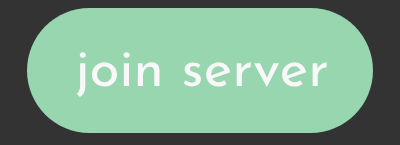
<style>
.page{position:relative;width:400px;height:145px;background:#98d6b0}
.page>*{position:absolute;margin:0}
.t1{font:55px "JosefinSans-Regular";color:#f8f8f8}
</style>
<div class="page">
<p class="t1" style="left:76px;top:52px;width:251px;height:45px">join server</p>
</div>
